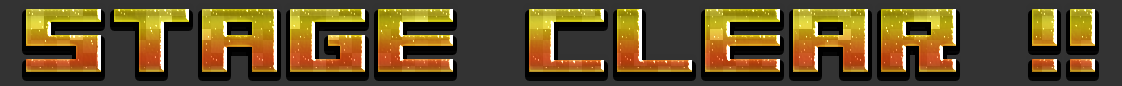
<style>
.page{position:relative;width:1122px;height:86px;background:#333333}
.page>*{position:absolute;margin:0}
.t1{font:100px "04b09";text-transform:uppercase}
</style>
<div class="page">
<p class="t1" style="left:26px;top:9px;width:1069px;height:63px">STAGE CLEAR !!</p>
</div>
